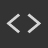
<style>
.page{position:relative;width:48px;height:48px;background:#333333}
.page>*{position:absolute;margin:0}
.t1{font:36px "Consolas";color:#d5d5d5}
</style>
<div class="page">
<p class="t1" style="left:6px;top:13px;width:36px;height:21px">&lt;&gt;</p>
</div>
